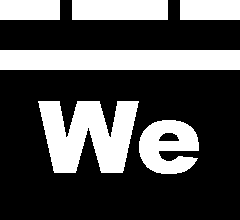
<style>
.page{position:relative;width:240px;height:220px;background:#000000}
.page>*{position:absolute;margin:0}
.t1{font:12px "Arial-Black";color:#ffffff}
</style>
<div class="page">
<p class="t1" style="left:38px;top:101px;width:161px;height:73px;text-align:center">We</p>
</div>
